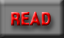
<style>
.page{position:relative;width:64px;height:38px}
.page>*{position:absolute;margin:0}
.t1{font:18px "GothicXB-HM"}
</style>
<div class="page">
<p class="t1" style="left:11px;top:11px;width:40px;height:15px">READ</p>
</div>
